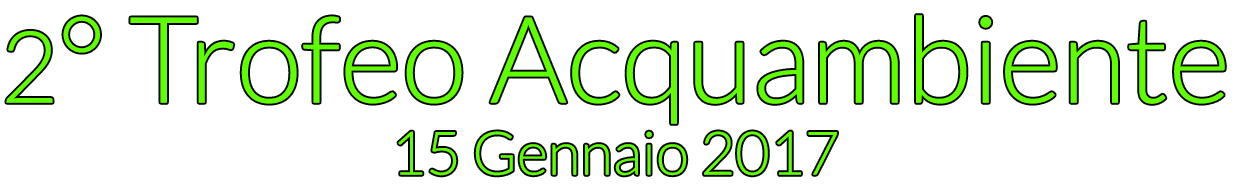
<style>
.page{position:relative;width:1243px;height:192px;background:#ffffff}
.page>*{position:absolute;margin:0}
.t1{font:120px "Lato-Light";color:#60ff00}
.t2{font:100px "Lato-Light";color:#60ff00}
.t3{font:60px "Lato-Light";color:#60ff00}
</style>
<div class="page">
<p class="t1" style="left:6px;top:15px;width:1219px;height:161px;text-align:center"><span class="t2">2</span>° Trofeo Acquambiente<br><span class="t3">15 Gennaio 2017</span></p>
</div>
